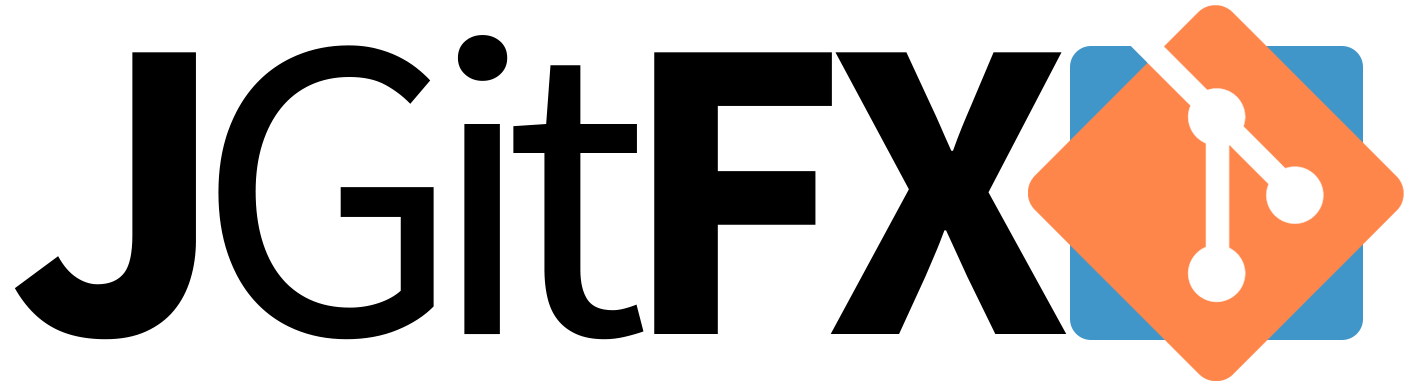
<style>
.page{position:relative;width:1410px;height:386px;background:#ffffff}
.page>*{position:absolute;margin:0}
.t1{font:432.3px "SourceSansPro-Regular";letter-spacing:-0.05em;color:#000000}
.t2{font:432.3px "SourceSansPro-Bold";letter-spacing:-0.05em;color:#000000}
</style>
<div class="page">
<p class="t1" style="left:14px;top:35px;width:1053px;height:305px"><span class="t2">J</span>Git<span class="t2">FX</span></p>
</div>
